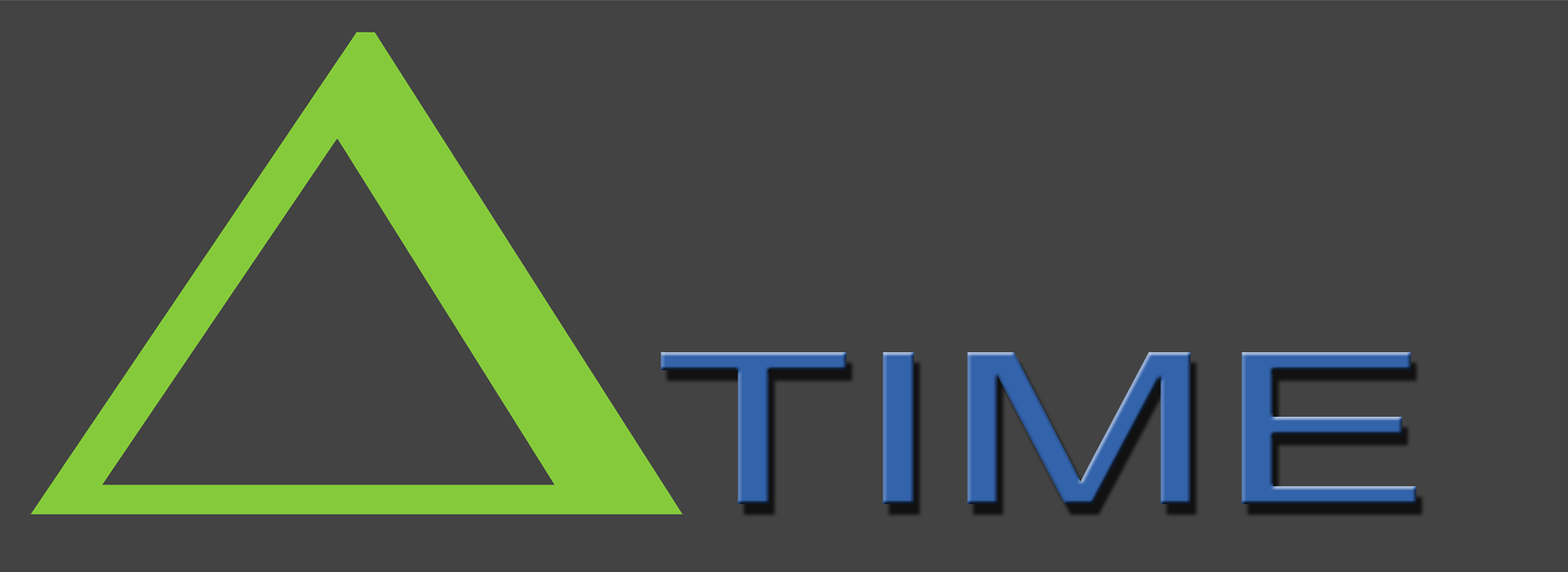
<style>
.page{position:relative;width:1568px;height:572px;background:#434343}
.page>*{position:absolute;margin:0}
.t1{font:211.7px "ArialMT";color:#3363ab;scale:1.54 1}
</style>
<div class="page">
<p class="t1" style="left:661px;top:352px;width:756px;height:152px">TIME</p>
</div>
